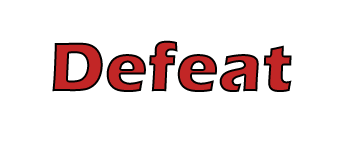
<style>
.page{position:relative;width:350px;height:150px;background:#ffffff}
.page>*{position:absolute;margin:0}
.t1{font:72px "ErasITC-Bold"}
</style>
<div class="page">
<p class="t1" style="left:52px;top:40px;width:240px;height:52px">Defeat</p>
</div>
